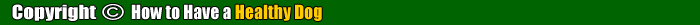
<style>
.page{position:relative;width:700px;height:25px;background:#006400}
.page>*{position:absolute;margin:0}
.t1{font:18px "Impact";color:#ffffff;scale:1.17 1}
.t2{font:18px "Impact";color:#ffffff}
.t3{font:18px "Impact";color:#ffcc00}
</style>
<div class="page">
<p class="t1" style="left:12px;top:4px;width:85px;height:17px">Copyright</p>
<p class="t2" style="left:131px;top:4px;width:191px;height:17px">How to Have a <span class="t3">Healthy Dog</span></p>
</div>
